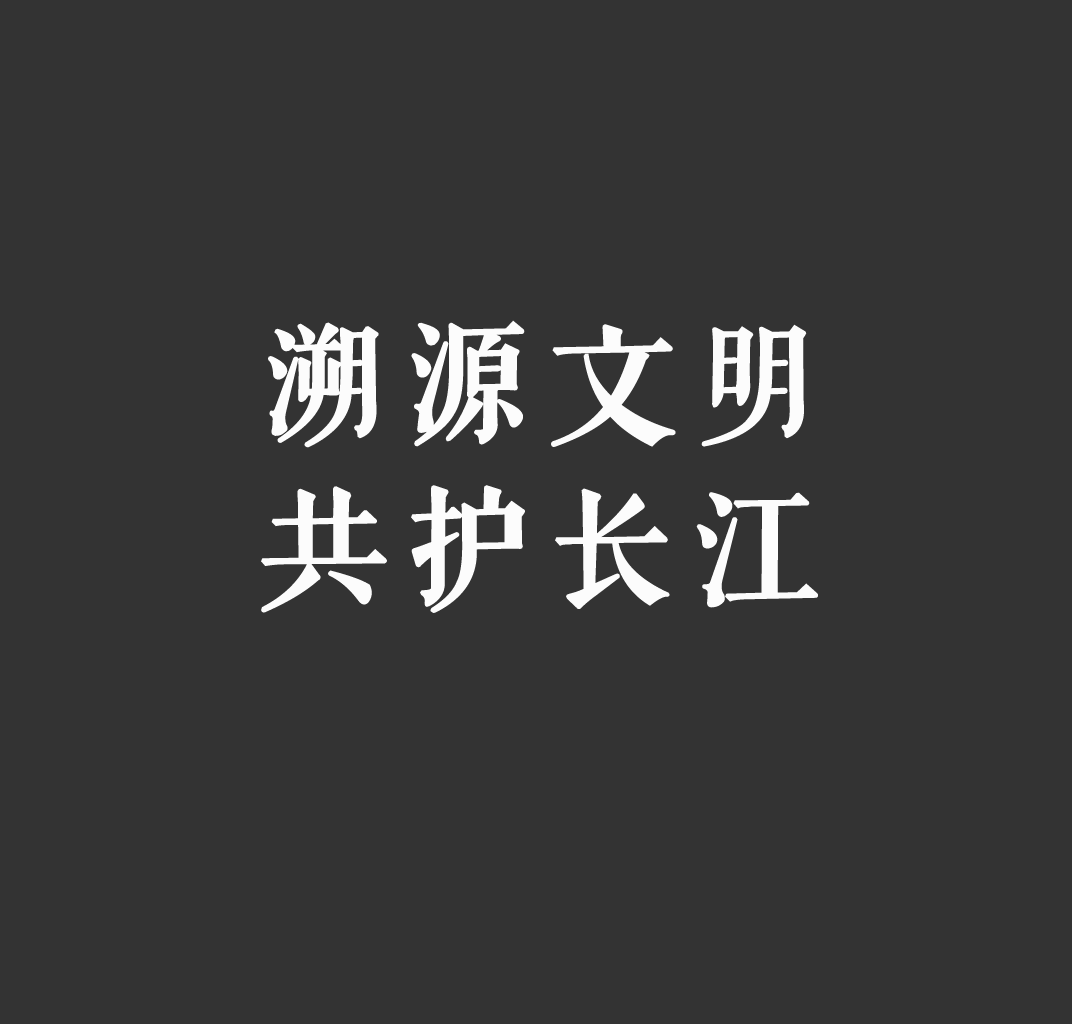
<style>
.page{position:relative;width:1072px;height:1024px;background:#333333}
.page>*{position:absolute;margin:0}
.t1{font:127.7px/165px "FZQKBYSJW--GB1-0";letter-spacing:0.1em;color:#fcfcfc;font-weight:bold}
</style>
<div class="page">
<p class="t1" style="left:261px;top:320px;width:557px;height:293px;text-align:center">溯源文明<br>共护长江</p>
</div>
